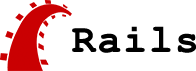
<style>
.page{position:relative;width:196px;height:71px;background:#ffffff}
.page>*{position:absolute;margin:0}
.t1{font:39.7px "CourierNewPS-BoldMT";letter-spacing:0.05em;color:#000000}
</style>
<div class="page">
<p class="t1" style="left:72px;top:26px;width:124px;height:27px">Rails</p>
</div>
